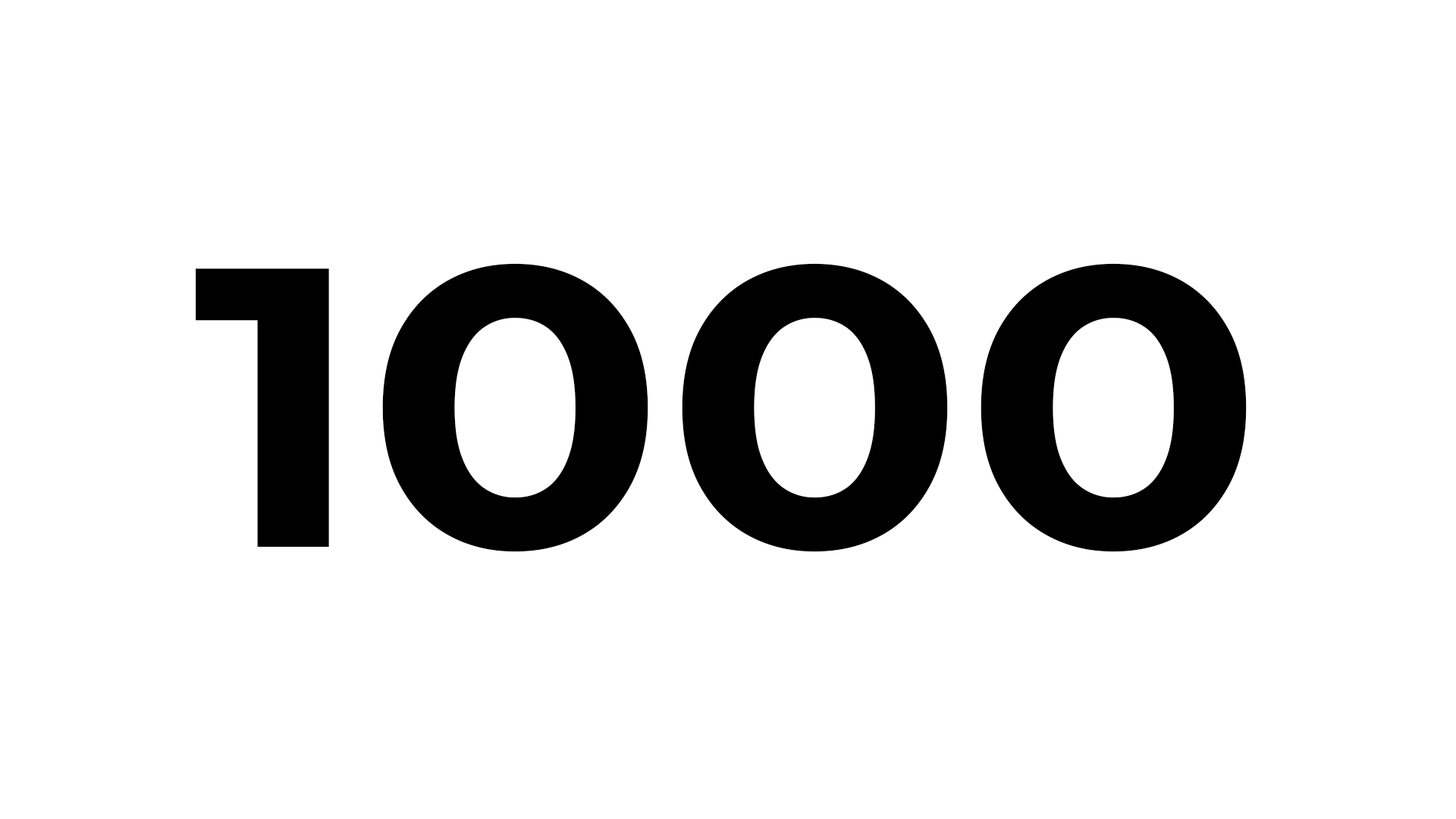
<style>
.page{position:relative;width:1456px;height:819px;background:#ffffff}
.page>*{position:absolute;margin:0}
.t1{font:397.4px "MontserratRoman-Bold";color:#000000;scale:1.11 1}
</style>
<div class="page">
<p class="t1" style="left:196px;top:263px;width:1051px;height:289px">1000</p>
</div>
